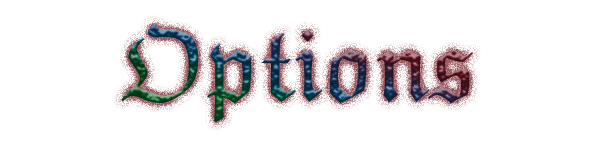
<style>
.page{position:relative;width:600px;height:150px;background:#ffffff}
.page>*{position:absolute;margin:0}
.t1{font:105px "EuclidFraktur"}
</style>
<div class="page">
<p class="t1" style="left:121px;top:23px;width:352px;height:100px">Options</p>
</div>
